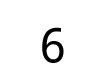
<style>
.page{position:relative;width:105px;height:83px;background:#ffffff}
.page>*{position:absolute;margin:0}
.t1{font:47.9px "DroidSans";color:#000000}
</style>
<div class="page">
<p class="t1" style="left:42px;top:27px;width:22px;height:36px">6</p>
</div>
